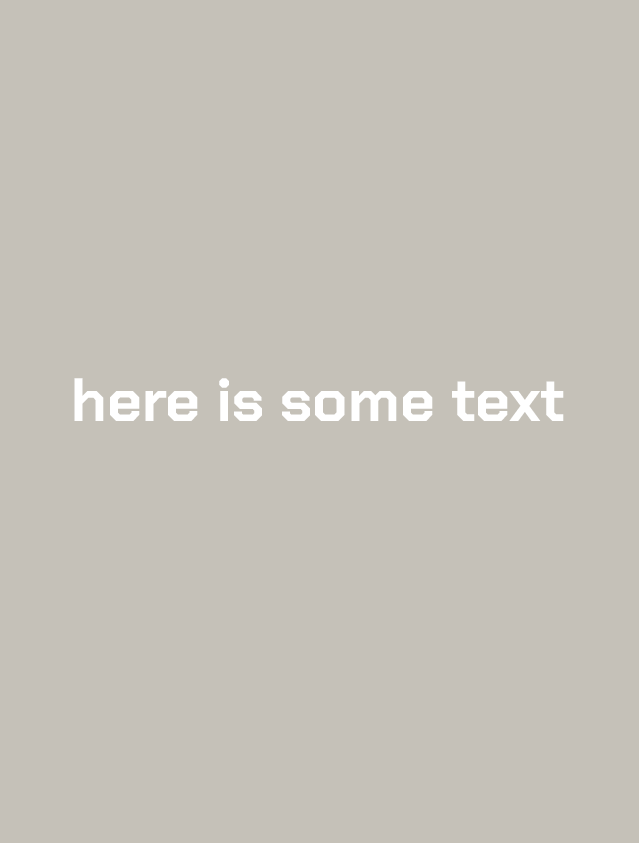
<style>
.page{position:relative;width:639px;height:843px;background:#c5c1b8}
.page>*{position:absolute;margin:0}
.t1{font:60px "ChakraPetch-Bold";color:#ffffff}
</style>
<div class="page">
<p class="t1" style="left:74px;top:378px;width:490px;height:43px">here is some text</p>
</div>
